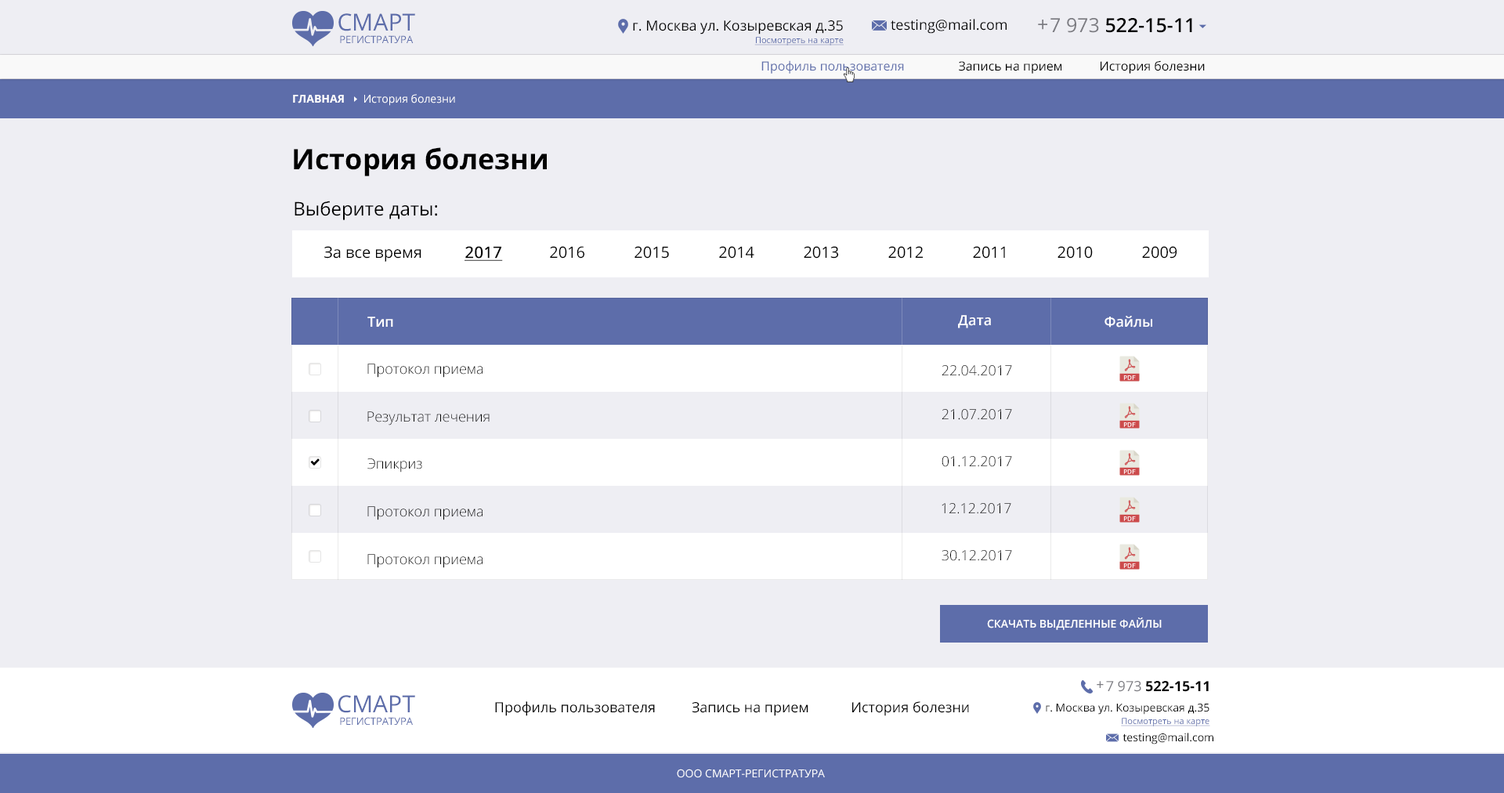
<style>
.page{position:relative;width:1504px;height:793px;background:#eeeef3}
.page>*{position:absolute;margin:0}
.t1{font:10.2px/12.5px "OpenSans";letter-spacing:-0.005em;color:#5d6daa}
.t2{font:23.5px/12.5px "OpenSans";color:#5d6daa}
.t3{font:14.1px/11px "OpenSans";color:#000000}
.t4{font:8.6px/12.5px "OpenSans";color:#5d6daa;text-decoration:underline}
.t5{font:14.1px "OpenSans";color:#000000}
.t6{font:19.6px "OpenSans";color:#7b7b81}
.t7{font:19.6px "OpenSans-Semibold";color:#000000}
.t8{font:19.6px "OpenSans";color:#000000}
.t9{font:12.5px "OpenSans";color:#000000}
.t10{font:12.5px "OpenSans";color:#5d6daa}
.t11{font:11px "OpenSans";color:#ffffff}
.t12{font:11px "OpenSans-Bold";color:#ffffff}
.t13{font:28.3px "OpenSans-Bold";color:#000000}
.t14{font:18.8px "OpenSans";color:#000000}
.t15{font:15.7px "OpenSans";color:#000000}
.t16{font:15.7px "OpenSans";color:#000000;font-weight:bold;text-decoration:underline}
.t17{font:14.1px "OpenSans-Semibold";color:#ffffff}
.t18{font:14.1px "OpenSans-Light";color:#000000}
.t19{font:11px "OpenSans-Semibold";color:#ffffff;text-transform:uppercase}
.t20{font:14.1px "OpenSans";color:#7b7b81}
.t21{font:14.1px "OpenSans-Bold";color:#000000}
.t22{font:11px/11px "OpenSans";color:#000000}
.t23{font:11px "OpenSans";color:#000000}
</style>
<div class="page">
<p class="t1" style="left:338px;top:13px;width:77px;height:30px;text-align:center"><span class="t2">CМАРТ<br></span>РЕГИСТРАТУРА</p>
<p class="t3" style="left:633px;top:20px;width:211px;height:25px;text-align:right">г. Москва ул. Козыревская д.35<br><span class="t4">Посмотреть на карте</span></p>
<p class="t5" style="left:891px;top:19px;width:116px;height:15px">testing@mail.com</p>
<p class="t6" style="left:1038px;top:20px;width:9px;height:10px">+</p>
<p class="t7" style="left:1051px;top:18px;width:141px;height:15px"><span class="t8">  </span><span class="t6">7 973 </span>522-15-11</p>
<p class="t9" style="left:761px;top:60px;width:444px;height:14px"><span class="t10">Профиль пользователя</span>  Запись на прием  История болезни</p>
<p class="t11" style="left:293px;top:94px;width:162px;height:12px"><span class="t12">ГЛАВНАЯ      </span>История болезни</p>
<p class="t13" style="left:294px;top:147px;width:253px;height:29px">История болезни</p>
<p class="t14" style="left:295px;top:201px;width:142px;height:19px">Выберите даты:</p>
<p class="t15" style="left:324px;top:246px;width:853px;height:16px">За все время  <span class="t16">2017</span>  2016  2015  2014  2013  2012  2011  2010  2009</p>
<p class="t17" style="left:367px;top:316px;width:26px;height:11px">Тип</p>
<p class="t17" style="left:958px;top:315px;width:33px;height:13px">Дата</p>
<p class="t17" style="left:1105px;top:316px;width:47px;height:11px">Файлы</p>
<p class="t18" style="left:367px;top:363px;width:116px;height:15px">Протокол приема</p>
<p class="t18" style="left:942px;top:365px;width:70px;height:11px">22.04.2017</p>
<p class="t18" style="left:367px;top:411px;width:123px;height:14px">Результат лечения</p>
<p class="t18" style="left:942px;top:409px;width:70px;height:11px">21.07.2017</p>
<p class="t18" style="left:367px;top:458px;width:55px;height:14px">Эпикриз</p>
<p class="t18" style="left:942px;top:456px;width:70px;height:11px">01.12.2017</p>
<p class="t18" style="left:367px;top:506px;width:116px;height:14px">Протокол приема</p>
<p class="t18" style="left:942px;top:503px;width:69px;height:11px">12.12.2017</p>
<p class="t18" style="left:367px;top:554px;width:116px;height:14px">Протокол приема</p>
<p class="t18" style="left:942px;top:550px;width:70px;height:11px">30.12.2017</p>
<p class="t19" style="left:987px;top:617px;width:175px;height:13px">СКАЧАТЬ ВЫДЕЛЕННЫЕ ФАЙЛЫ</p>
<p class="t20" style="left:1097px;top:681px;width:7px;height:7px">+</p>
<p class="t21" style="left:1106px;top:681px;width:103px;height:11px"><span class="t5">  </span><span class="t20">7 973 </span>522-15-11</p>
<p class="t1" style="left:338px;top:695px;width:77px;height:30px;text-align:center"><span class="t2">CМАРТ<br></span>РЕГИСТРАТУРА</p>
<p class="t5" style="left:495px;top:701px;width:474px;height:15px">Профиль пользователя  Запись на прием      История болезни</p>
<p class="t22" style="left:1046px;top:703px;width:164px;height:23px;text-align:right">г. Москва ул. Козыревская д.35<br><span class="t4">Посмотреть на карте</span></p>
<p class="t23" style="left:1123px;top:732px;width:90px;height:12px">testing@mail.com</p>
<p class="t11" style="left:677px;top:769px;width:148px;height:9px">ООО СМАРТ-РЕГИСТРАТУРА</p>
</div>
